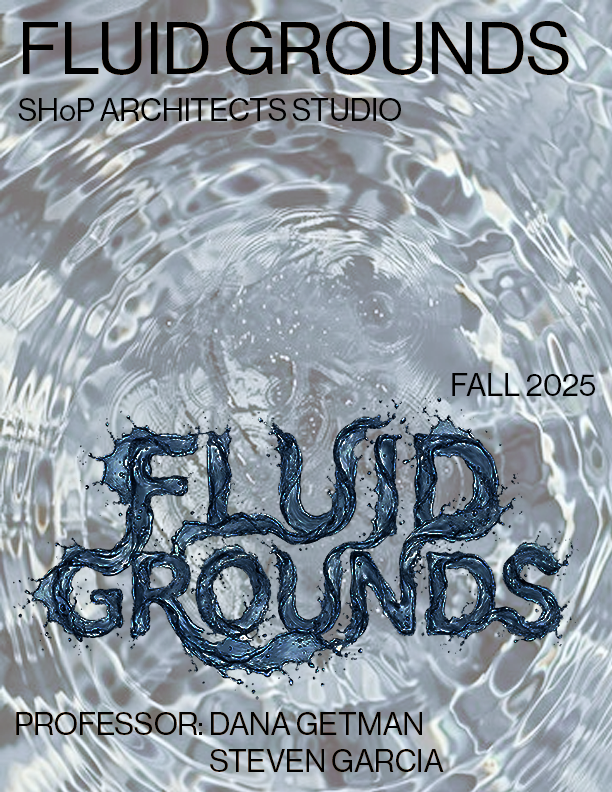
<style>
.page{position:relative;width:612px;height:792px}
.page>*{position:absolute;margin:0}
.t1{font:72px "NHaasGroteskDSPro-55Rg";color:#000000}
.t2{font:31px "NHaasGroteskDSPro-55Rg";color:#000000}
</style>
<div class="page">
<p class="t1" style="left:23px;top:21px;width:546px;height:54px">FLUID GROUNDS</p>
<p class="t2" style="left:18px;top:98px;width:383px;height:23px">SHoP ARCHITECTS STUDIO</p>
<p class="t2" style="left:452px;top:373px;width:143px;height:23px">FALL 2025</p>
<p class="t2" style="left:16px;top:712px;width:428px;height:60px">PROFESSOR: DANA GETMAN<br>        STEVEN GARCIA</p>
</div>
